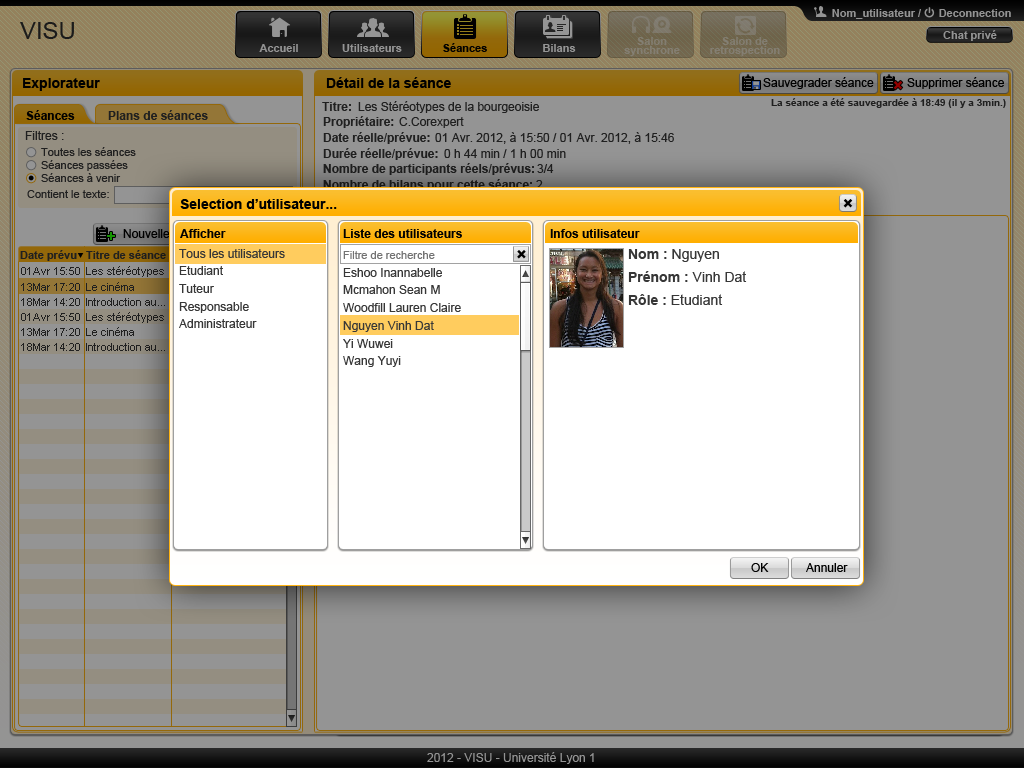
<style>
.page{position:relative;width:1024px;height:768px;background:#949494}
.page>*{position:absolute;margin:0}
.t1{font:11px "Arial-BoldMT";color:#949494}
.t2{font:24px "ArialMT";color:#2e2e2e}
.t3{font:11px/9px "Arial-BoldMT";color:#847d71}
.t4{font:11px/9px "Arial-BoldMT";color:#837d71}
.t5{font:11px "Arial-BoldMT";color:#000000}
.t6{font:14px "Arial-BoldMT";color:#000000}
.t7{font:12px "ArialMT";color:#000000}
.t8{font:19.3px "Arial-BoldMT";color:#940000}
.t9{font:12px "Arial-BoldMT";color:#373737}
.t10{font:12px "ArialMT";color:#373737}
.t11{font:10px "Arial-BoldMT";color:#373737}
.t12{font:12px "Arial-BoldMT";color:#000000}
.t13{font:11px "ArialMT";color:#373737}
.t14{font:12px "Arial-BoldMT";color:#1d1d1d}
.t15{font:12px "ArialMT";color:#1d1d1d}
.t16{font:12px "Arial-BoldMT";color:#181817}
.t17{font:12px "Arial-BoldMT";color:#feb30d}
.t18{font:19.3px "Arial-BoldMT";color:#000000}
.t19{font:14px "Arial-BoldMT";color:#159400}
.t20{font:11px "Arial-BoldMT";color:#373737}
.t21{font:11px "Arial-BoldMT";color:#202020}
.t22{font:11px "ArialMT";color:#737373}
.t23{font:14px "ArialMT";color:#373737}
.t24{font:14px "Arial-BoldMT";color:#373737}
.t25{font:12px "ArialMT";color:#949494}
</style>
<div class="page">
<p class="t1" style="left:832px;top:9px;width:89px;height:10px">Nom_utilisateur /</p>
<p class="t1" style="left:939px;top:9px;width:72px;height:8px">Deconnection</p>
<p class="t2" style="left:20px;top:22px;width:54px;height:17px">VISU</p>
<p class="t1" style="left:943px;top:30px;width:54px;height:11px">Chat privé</p>
<p class="t3" style="left:624px;top:37px;width:56px;height:19px;text-align:center">Salon<br>synchrone</p>
<p class="t4" style="left:710px;top:37px;width:70px;height:19px;text-align:center">Salon de<br>retrospection</p>
<p class="t1" style="left:259px;top:44px;width:39px;height:8px">Accueil</p>
<p class="t1" style="left:342px;top:44px;width:60px;height:8px">Utilisateurs</p>
<p class="t5" style="left:443px;top:43px;width:44px;height:9px">Séances</p>
<p class="t1" style="left:543px;top:44px;width:33px;height:8px">Bilans</p>
<p class="t6" style="left:23px;top:78px;width:77px;height:13px">Explorateur</p>
<p class="t6" style="left:326px;top:77px;width:125px;height:11px">Détail de la séance</p>
<p class="t7" style="left:763px;top:77px;width:111px;height:12px">Sauvegrader séance</p>
<p class="t7" style="left:907px;top:77px;width:97px;height:12px">Supprimer séance</p>
<p class="t8" style="left:893px;top:81px;width:10px;height:9px;rotate:-45deg">+</p>
<p class="t9" style="left:322px;top:102px;width:29px;height:9px">Titre:</p>
<p class="t10" style="left:358px;top:101px;width:181px;height:12px">Les Stéréotypes de la bourgeoisie</p>
<p class="t11" style="left:771px;top:98px;width:235px;height:10px">La séance a été sauvegardée à 18:49 (il y a 3min.)</p>
<p class="t12" style="left:26px;top:110px;width:49px;height:10px">Séances</p>
<p class="t9" style="left:108px;top:110px;width:100px;height:10px">Plans de séances</p>
<p class="t9" style="left:323px;top:116px;width:71px;height:12px">Propriétaire:</p>
<p class="t10" style="left:399px;top:117px;width:65px;height:11px">C.Corexpert</p>
<p class="t10" style="left:25px;top:131px;width:39px;height:9px">Filtres :</p>
<p class="t9" style="left:323px;top:132px;width:107px;height:12px">Date réelle/prévue:</p>
<p class="t10" style="left:435px;top:132px;width:239px;height:12px">01 Avr. 2012, à 15:50 / 01 Avr. 2012, à 15:46</p>
<p class="t13" style="left:41px;top:147px;width:95px;height:9px">Toutes les séances</p>
<p class="t9" style="left:323px;top:148px;width:115px;height:12px">Durée réelle/prévue:</p>
<p class="t10" style="left:444px;top:149px;width:122px;height:9px">0 h 44 min / 1 h 00 min</p>
<p class="t13" style="left:41px;top:160px;width:87px;height:11px">Séances passées</p>
<p class="t13" style="left:41px;top:173px;width:80px;height:9px">Séances à venir</p>
<p class="t14" style="left:323px;top:163px;width:211px;height:12px">Nombre de participants réels/prévus:</p>
<p class="t15" style="left:537px;top:164px;width:17px;height:9px">3/4</p>
<p class="t16" style="left:323px;top:179px;width:209px;height:12px">Nombre de bilans pour cette séance:</p>
<p class="t13" style="left:27px;top:190px;width:82px;height:8px">Contient le texte:</p>
<p class="t6" style="left:180px;top:199px;width:157px;height:10px">Selection d’utilisateur...</p>
<p class="t17" style="left:324px;top:201px;width:87px;height:10px">Plan de séance</p>
<p class="t18" style="left:843px;top:199px;width:10px;height:9px;rotate:-45deg">+</p>
<p class="t19" style="left:107px;top:232px;width:8px;height:8px">+</p>
<p class="t7" style="left:123px;top:228px;width:89px;height:10px">Nouvelle séance</p>
<p class="t12" style="left:180px;top:229px;width:46px;height:9px">Afficher</p>
<p class="t12" style="left:343px;top:229px;width:119px;height:9px">Liste des utilisateurs</p>
<p class="t12" style="left:550px;top:229px;width:90px;height:9px">Infos utilisateur</p>
<p class="t20" style="left:20px;top:250px;width:57px;height:11px">Date prévu</p>
<p class="t21" style="left:86px;top:250px;width:80px;height:9px">Titre de séance</p>
<p class="t10" style="left:179px;top:249px;width:106px;height:9px">Tous les utilisateurs</p>
<p class="t22" style="left:343px;top:251px;width:92px;height:8px">Filtre de recherche</p>
<p class="t18" style="left:517px;top:250px;width:9px;height:9px;rotate:-45deg">+</p>
<p class="t23" style="left:628px;top:249px;width:91px;height:13px"><span class="t24">Nom : </span>Nguyen</p>
<p class="t13" style="left:21px;top:267px;width:59px;height:8px">01Avr 15:50</p>
<p class="t13" style="left:86px;top:266px;width:78px;height:11px">Les stéréotypes</p>
<p class="t10" style="left:179px;top:266px;width:44px;height:9px">Etudiant</p>
<p class="t10" style="left:343px;top:268px;width:99px;height:9px">Eshoo Inannabelle</p>
<p class="t24" style="left:628px;top:271px;width:119px;height:11px">Prénom : <span class="t23">Vinh Dat</span></p>
<p class="t13" style="left:21px;top:283px;width:59px;height:8px">13Mar 17:20</p>
<p class="t13" style="left:86px;top:282px;width:48px;height:9px">Le cinéma</p>
<p class="t10" style="left:179px;top:284px;width:35px;height:9px">Tuteur</p>
<p class="t10" style="left:343px;top:285px;width:97px;height:9px">Mcmahon Sean M</p>
<p class="t23" style="left:628px;top:294px;width:95px;height:11px"><span class="t24">Rôle : </span>Etudiant</p>
<p class="t13" style="left:21px;top:298px;width:59px;height:8px">18Mar 14:20</p>
<p class="t13" style="left:86px;top:298px;width:79px;height:8px">Introduction au...</p>
<p class="t10" style="left:179px;top:302px;width:70px;height:11px">Responsable</p>
<p class="t10" style="left:343px;top:303px;width:118px;height:9px">Woodfill Lauren Claire</p>
<p class="t13" style="left:21px;top:313px;width:59px;height:8px">01Avr 15:50</p>
<p class="t13" style="left:86px;top:312px;width:78px;height:11px">Les stéréotypes</p>
<p class="t13" style="left:21px;top:328px;width:59px;height:8px">13Mar 17:20</p>
<p class="t13" style="left:86px;top:327px;width:48px;height:9px">Le cinéma</p>
<p class="t10" style="left:179px;top:319px;width:78px;height:9px">Administrateur</p>
<p class="t10" style="left:343px;top:321px;width:91px;height:11px">Nguyen Vinh Dat</p>
<p class="t10" style="left:343px;top:339px;width:50px;height:9px">Yi Wuwei</p>
<p class="t13" style="left:21px;top:343px;width:59px;height:8px">18Mar 14:20</p>
<p class="t13" style="left:86px;top:343px;width:79px;height:8px">Introduction au...</p>
<p class="t10" style="left:343px;top:356px;width:58px;height:11px">Wang Yuyi</p>
<p class="t7" style="left:751px;top:563px;width:18px;height:9px">OK</p>
<p class="t7" style="left:806px;top:563px;width:42px;height:9px">Annuler</p>
<p class="t25" style="left:427px;top:752px;width:167px;height:12px">2012 - VISU - Université Lyon 1</p>
</div>
